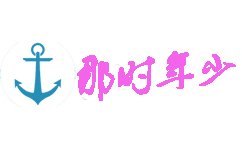
<style>
.page{position:relative;width:242px;height:150px;background:#ffffff}
.page>*{position:absolute;margin:0}
.t1{font:40px "2.0-";color:#f364eb}
</style>
<div class="page">
<p class="t1" style="left:77px;top:51px;width:159px;height:50px">那时年少</p>
</div>
